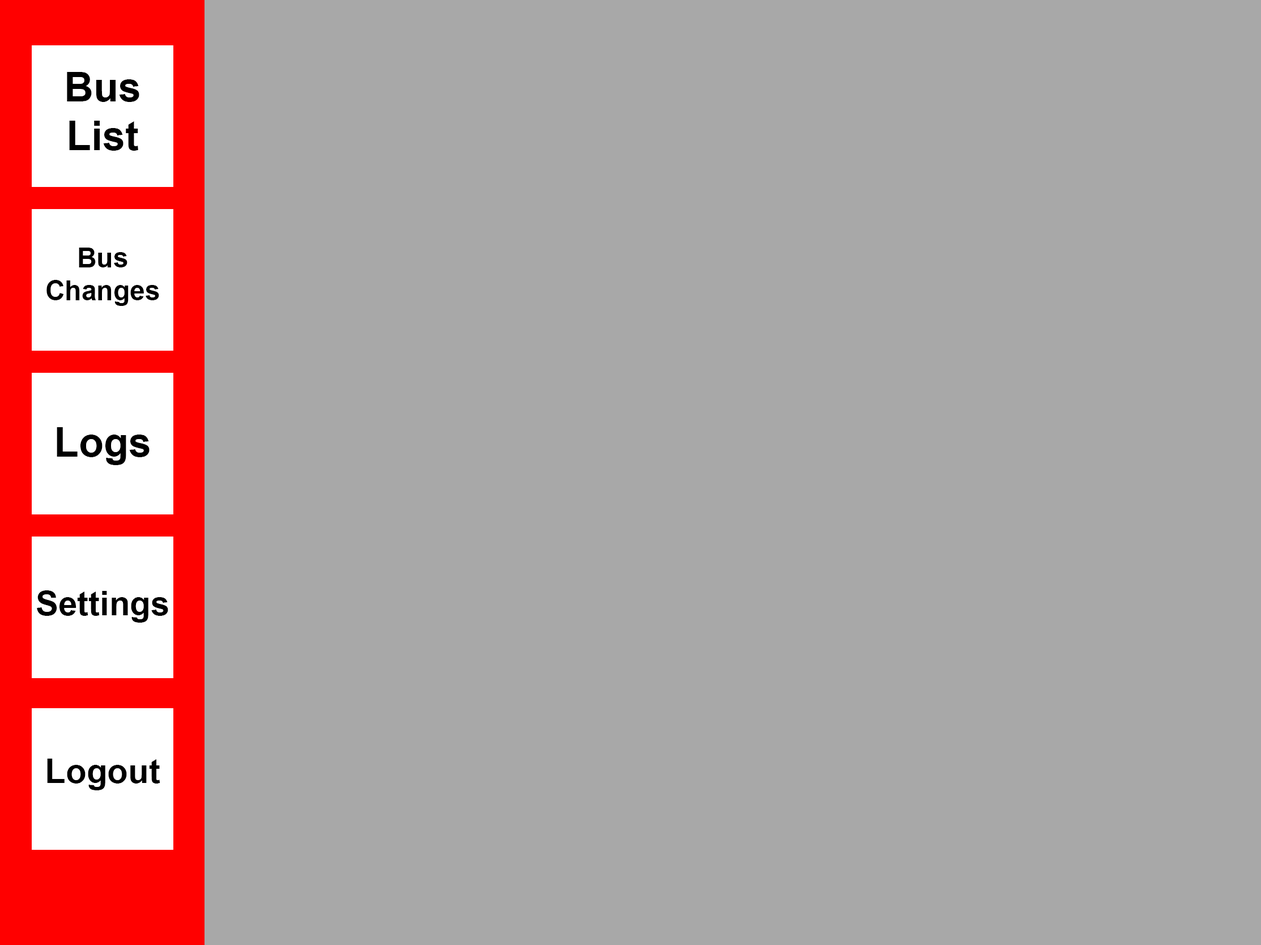
<style>
.page{position:relative;width:1261px;height:945px;background:#a8a8a8}
.page>*{position:absolute;margin:0}
.t1{font:40.8px "Arial-BoldMT";color:#000000}
.t2{font:27.2px "Arial-BoldMT";color:#000000}
.t3{font:34px "Arial-BoldMT";color:#000000}
</style>
<div class="page">
<p class="t1" style="left:67px;top:72px;width:72px;height:79px;text-align:center">Bus List</p>
<p class="t2" style="left:46px;top:248px;width:113px;height:58px;text-align:center">Bus Changes</p>
<p class="t1" style="left:57px;top:427px;width:93px;height:38px">Logs</p>
<p class="t3" style="left:37px;top:591px;width:131px;height:32px">Settings</p>
<p class="t3" style="left:47px;top:759px;width:113px;height:32px">Logout</p>
</div>
